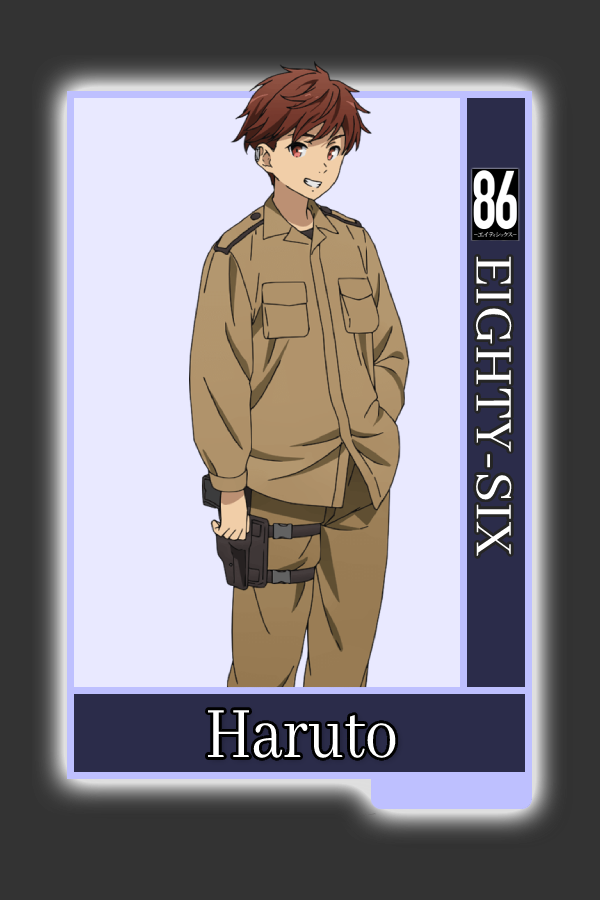
<style>
.page{position:relative;width:600px;height:900px;background:#e9e9ff}
.page>*{position:absolute;margin:0}
.t1{font:58.2px "AbhayaLibre-Regular";color:#ffffff}
.t2{font:79.6px "AbhayaLibre-Regular";color:#ffffff;scale:0.83 1}
</style>
<div class="page">
<p class="t1" style="left:476px;top:256px;width:36px;height:300px;rotate:90deg">EIGHTY-SIX</p>
<p class="t2" style="left:208px;top:710px;width:188px;height:48px">Haruto</p>
</div>
